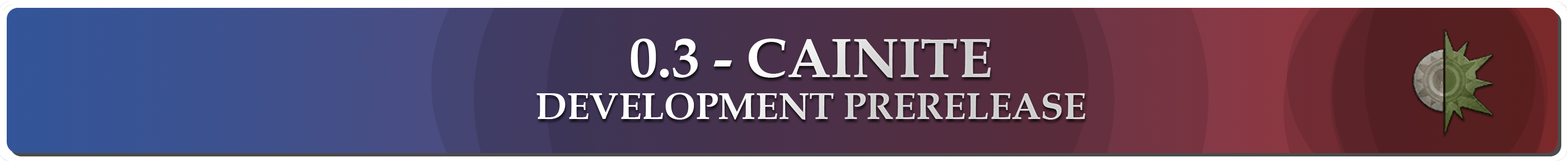
<style>
.page{position:relative;width:1568px;height:162px}
.page>*{position:absolute;margin:0}
.t1{font:37.3px/42px "BookAntiqua-Bold"}
.t2{font:56px "BookAntiqua-Bold"}
</style>
<div class="page">
<p class="t1" style="left:536px;top:39px;width:549px;height:81px;text-align:center"><span class="t2">0.3 - CAINITE<br></span>DEVELOPMENT PRERELEASE</p>
</div>
